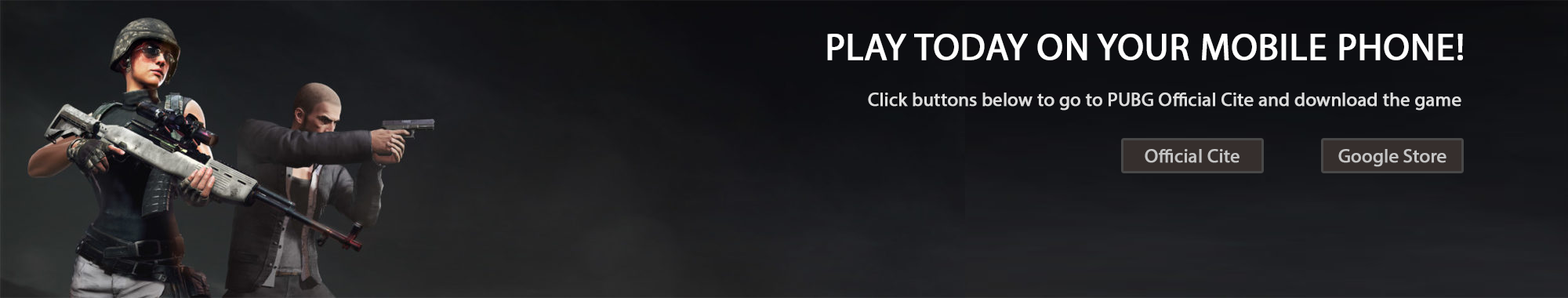
<style>
.page{position:relative;width:1568px;height:298px}
.page>*{position:absolute;margin:0}
.t1{font:37.6px "MyriadPro-Regular";color:#ffffff;font-weight:bold}
.t2{font:18.8px "MyriadPro-Regular";color:#dddddd;font-weight:bold}
.t3{font:18.8px "MyriadPro-Regular";color:#ffffff;font-weight:bold}
.t4{font:18.8px "MyriadPro-Regular";color:#c4c4c4;font-weight:bold}
</style>
<div class="page">
<p class="t1" style="left:827px;top:34px;width:636px;height:26px">PLAY TODAY ON YOUR MOBILE PHONE!</p>
<p class="t2" style="left:868px;top:93px;width:593px;height:18px"><span class="t3">   </span>Click buttons below to go to PUBG Official Cite and download the game</p>
<p class="t4" style="left:1145px;top:149px;width:95px;height:14px">Official Cite</p>
<p class="t4" style="left:1338px;top:149px;width:108px;height:18px">Google Store</p>
</div>
